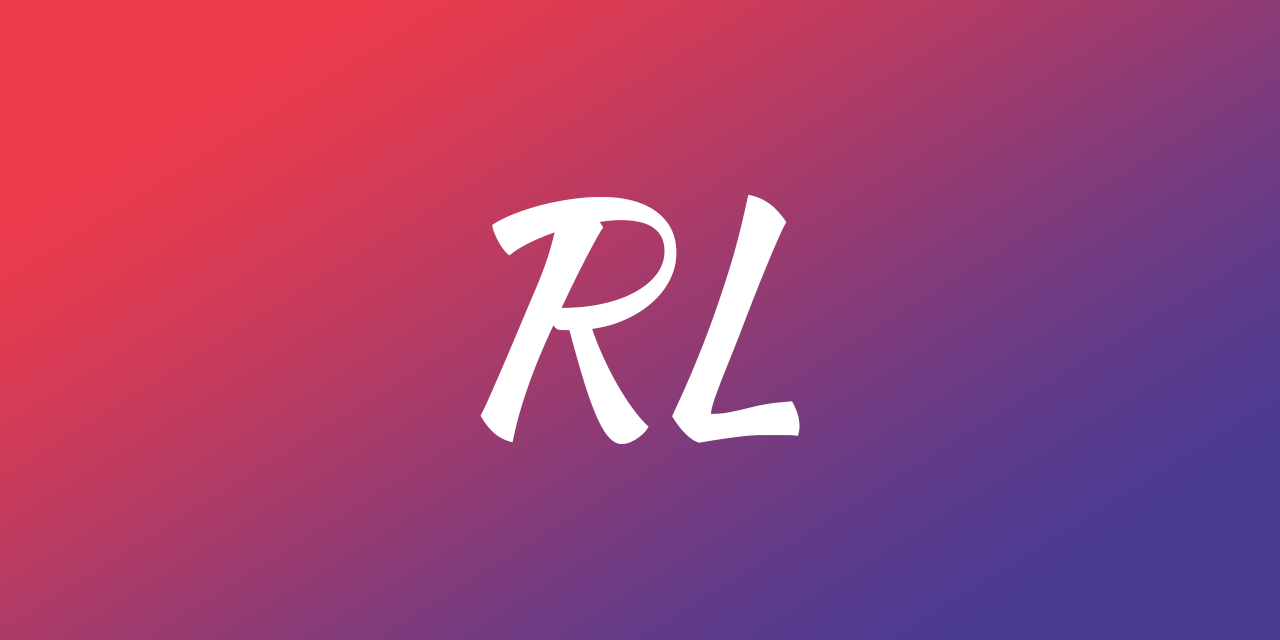
<style>
.page{position:relative;width:1280px;height:640px}
.page>*{position:absolute;margin:0}
.t1{font:300px "KaushanScript-Regular";color:#ffffff}
</style>
<div class="page">
<p class="t1" style="left:480px;top:194px;width:320px;height:250px">RL</p>
</div>
